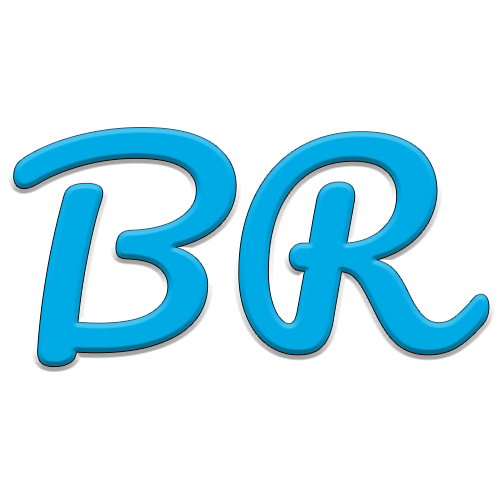
<style>
.page{position:relative;width:500px;height:500px;background:#ffffff}
.page>*{position:absolute;margin:0}
.t1{font:261.2px "Pacifico-Regular";color:#00aae5}
</style>
<div class="page">
<p class="t1" style="left:14px;top:128px;width:475px;height:239px">BR</p>
</div>
